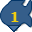
<style>
.page{position:relative;width:32px;height:32px;background:#355e8a}
.page>*{position:absolute;margin:0}
.t1{font:14px "Verdana-Bold";letter-spacing:0.14em;color:#f0ce11}
</style>
<div class="page">
<p class="t1" style="left:11px;top:12px;width:8px;height:10px">1</p>
</div>
